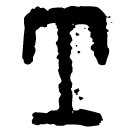
<style>
.page{position:relative;width:128px;height:128px;background:#ffffff}
.page>*{position:absolute;margin:0}
.t1{font:150.5px "MomsTypewriter";color:#000000}
</style>
<div class="page">
<p class="t1" style="left:22px;top:6px;width:91px;height:121px">T</p>
</div>
